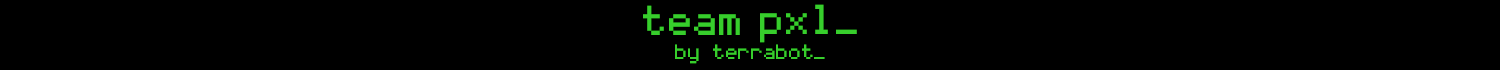
<style>
.page{position:relative;width:1500px;height:70px;background:#000000}
.page>*{position:absolute;margin:0}
.t1{font:66.7px "Coder's-Crux";color:#37ce2c}
.t2{font:33.3px "Coder's-Crux";color:#37ce2c}
</style>
<div class="page">
<p class="t1" style="left:643px;top:5px;width:97px;height:30px">team</p>
<p class="t1" style="left:760px;top:4px;width:97px;height:39px">pxl_</p>
<p class="t2" style="left:675px;top:44px;width:150px;height:20px">by terrabot_</p>
</div>
